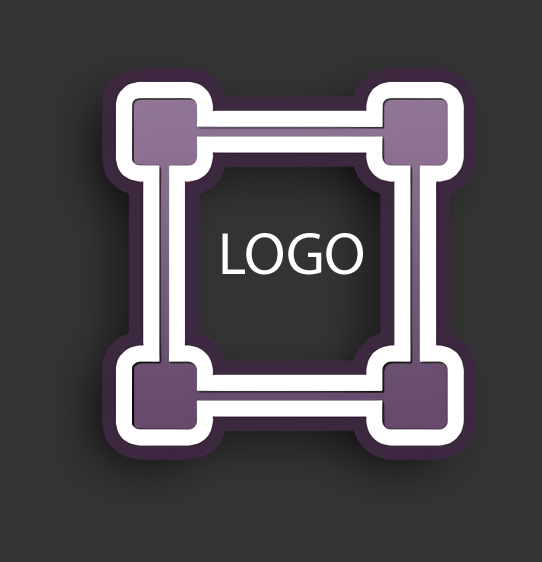
<style>
.page{position:relative;width:542px;height:562px;background:#333333}
.page>*{position:absolute;margin:0}
.t1{font:60px "MyriadPro-Regular";color:#ffffff}
</style>
<div class="page">
<p class="t1" style="left:222px;top:233px;width:141px;height:42px">LOGO</p>
</div>
